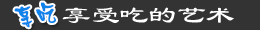
<style>
.page{position:relative;width:260px;height:30px;background:#333333}
.page>*{position:absolute;margin:0}
.t1{font:25.8px "Pop3EG-Bold-T-GB";color:#1083ea;font-weight:bold;scale:0.82 1}
.t2{font:24px "LiSu";color:#ffffff;scale:1.2 1}
</style>
<div class="page">
<p class="t1" style="left:14px;top:2px;width:42px;height:26px;rotate:-10deg">享吃</p>
<p class="t2" style="left:62px;top:7px;width:172px;height:16px">享受吃的艺术</p>
</div>
